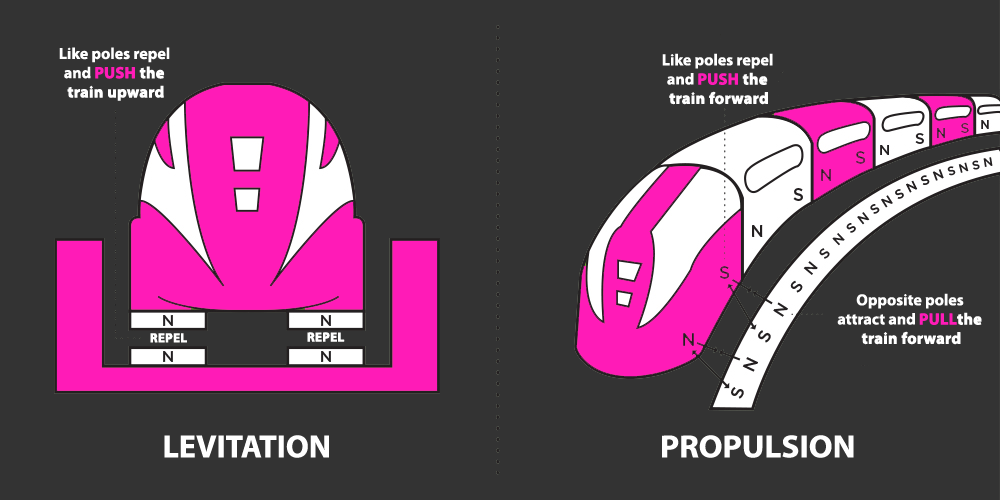
<style>
.page{position:relative;width:1000px;height:500px;background:#333333}
.page>*{position:absolute;margin:0}
.t1{font:16px "MyriadPro-Bold";color:#ffffff}
.t2{font:16px "MyriadPro-Bold";color:#ff1bb7;font-weight:bold}
.t3{font:16px "MyriadPro-Bold";color:#ffffff;font-weight:bold}
.t4{font:13px "MyriadPro-Bold";color:#ffffff;font-weight:bold}
.t5{font:32px "MyriadPro-Bold";color:#ffffff}
.t6{font:32px "MyriadPro-Bold";color:#ffffff;scale:1.04 1}
</style>
<div class="page">
<p class="t1" style="left:59px;top:47px;width:111px;height:54px;text-align:center">Like poles repel <br>and <span class="t2">PUSH </span><span class="t3">the <br>train upward</span></p>
<p class="t1" style="left:662px;top:53px;width:111px;height:52px;text-align:center">Like poles repel <br>and <span class="t2">PUSH </span><span class="t3">the <br>train forward</span></p>
<p class="t1" style="left:837px;top:293px;width:145px;height:52px;text-align:center">Opposite poles <br>attract and <span class="t2">PULL</span><span class="t3">the <br>train forward</span></p>
<p class="t4" style="left:150px;top:333px;width:37px;height:10px">REPEL</p>
<p class="t4" style="left:307px;top:332px;width:38px;height:10px">REPEL</p>
<p class="t5" style="left:164px;top:435px;width:165px;height:23px">LEVITATION</p>
<p class="t6" style="left:662px;top:435px;width:192px;height:23px">PROPULSION</p>
</div>
